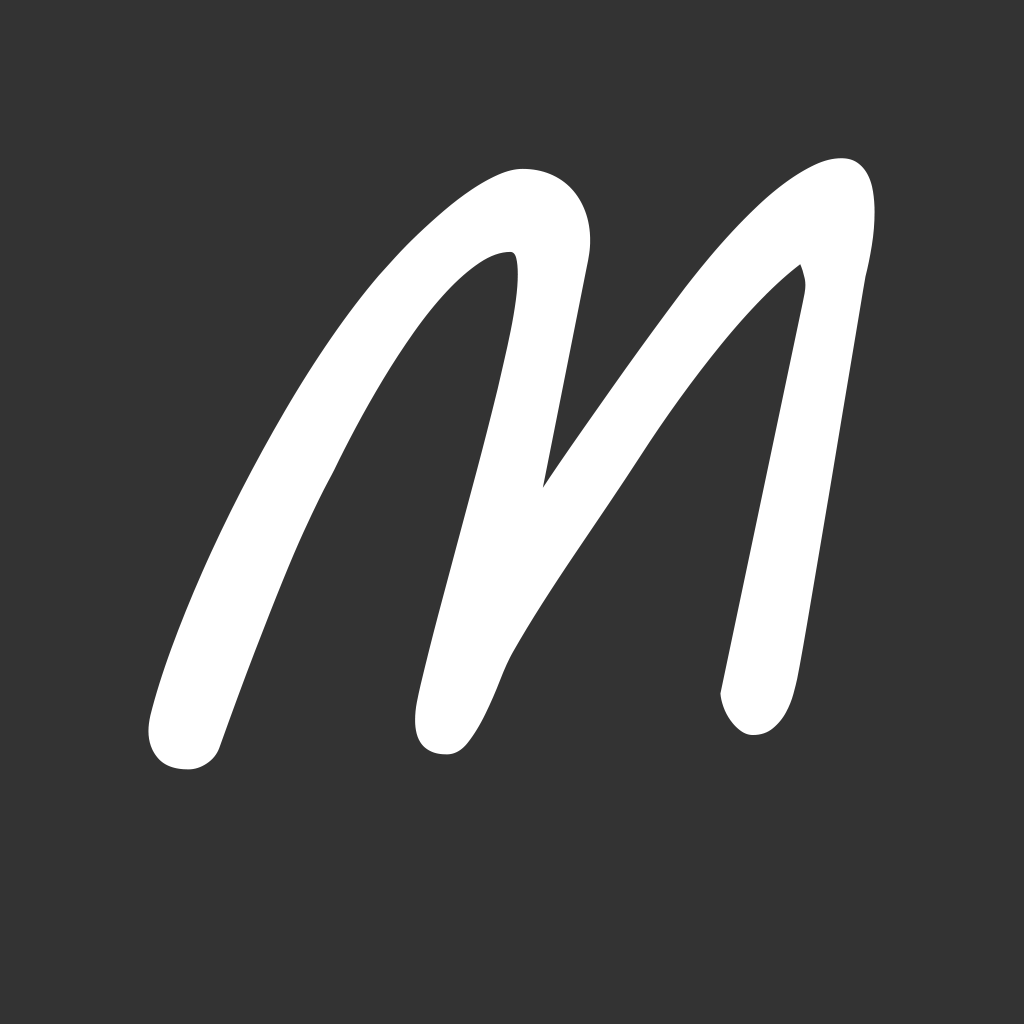
<style>
.page{position:relative;width:1024px;height:1024px;background:#333333}
.page>*{position:absolute;margin:0}
.t1{font:809px "MVBoli";color:#ffffff}
</style>
<div class="page">
<p class="t1" style="left:148px;top:158px;width:727px;height:612px">M</p>
</div>
